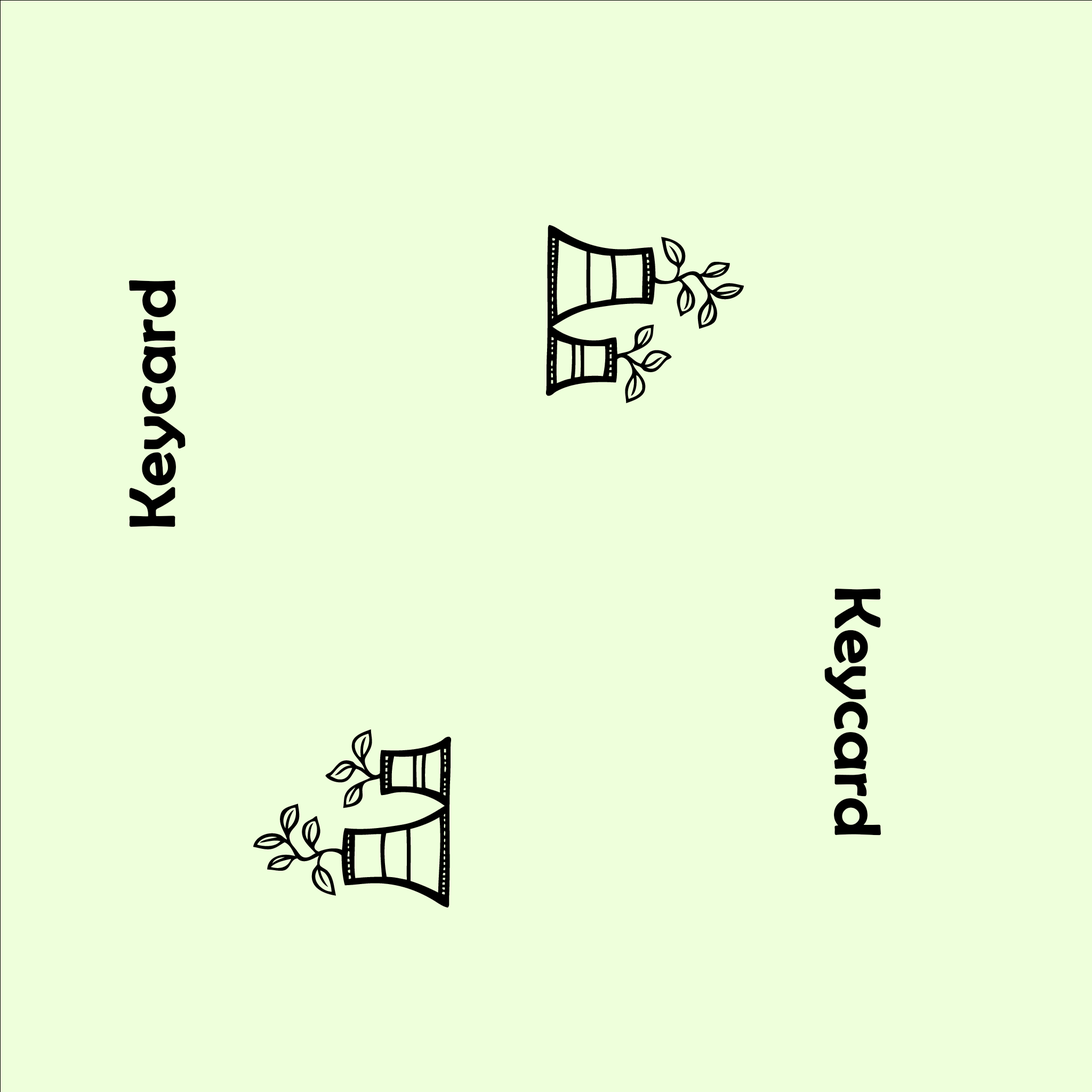
<style>
.page{position:relative;width:1092px;height:1092px;background:#eeffdb}
.page>*{position:absolute;margin:0}
.t1{font:64px "BerlinSansFB-Reg";color:#000000;font-weight:bold;scale:1.1 1}
</style>
<div class="page">
<p class="t1" style="left:129px;top:280px;width:57px;height:247px;rotate:-90deg">Keycard</p>
<p class="t1" style="left:824px;top:589px;width:57px;height:247px;rotate:90deg">Keycard</p>
</div>
